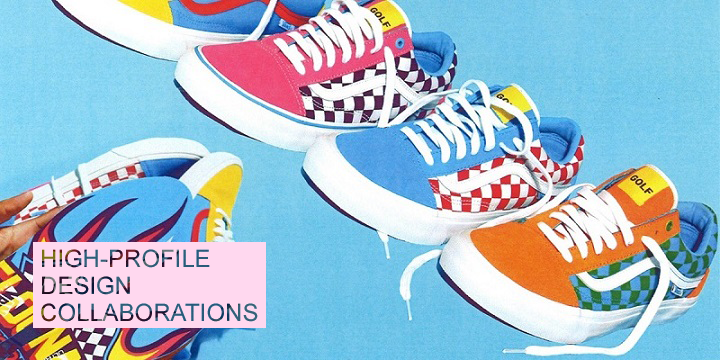
<style>
.page{position:relative;width:720px;height:360px}
.page>*{position:absolute;margin:0}
.t1{font:24px/26.7px "ArialMT";text-transform:uppercase}
</style>
<div class="page">
<p class="t1" style="left:41px;top:249px;width:217px;height:73px">high-profile design collaborations</p>
</div>
